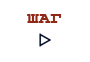
<style>
.page{position:relative;width:90px;height:62px;background:#ffffff}
.page>*{position:absolute;margin:0}
.t1{font:16px "CourierNewPS-BoldMT";color:#912816;scale:1.18 1}
</style>
<div class="page">
<p class="t1" style="left:27px;top:14px;width:35px;height:9px">ШАГ</p>
</div>
